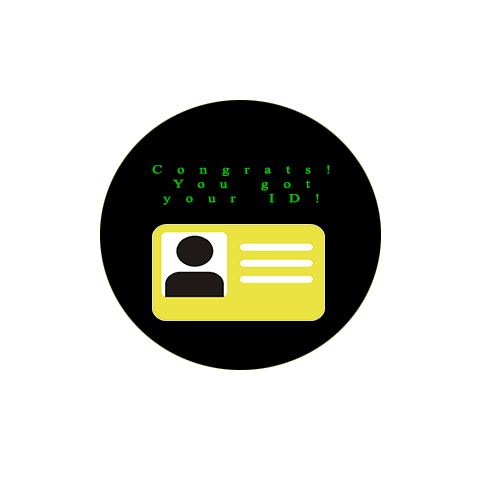
<style>
.page{position:relative;width:500px;height:500px;background:#ffffff}
.page>*{position:absolute;margin:0}
.t1{font:12px "TimesNewRomanPSMT";letter-spacing:0.985em;color:#00d200;scale:1.26 1}
</style>
<div class="page">
<p class="t1" style="left:152px;top:165px;width:178px;height:40px;text-align:center">Congrats!<br>You got<br>your ID!</p>
</div>
